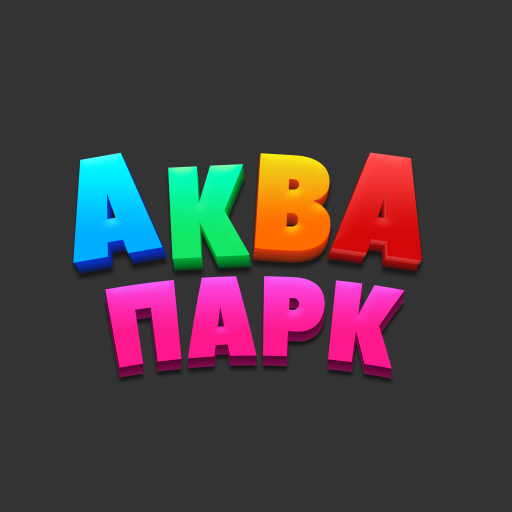
<style>
.page{position:relative;width:512px;height:512px;background:#333333}
.page>*{position:absolute;margin:0}
.t1{font:142.7px "PeaceSans";text-transform:uppercase;scale:0.85 1}
.t2{font:136.5px "PeaceSans";text-transform:uppercase;scale:0.85 1}
.t3{font:142.7px "PeaceSans";color:#df1919;text-transform:uppercase;scale:0.85 1}
.t4{font:130.3px "PeaceSans";text-transform:uppercase;scale:0.85 1}
.t5{font:111.7px "PeaceSans";text-transform:uppercase;scale:0.77 1}
</style>
<div class="page">
<p class="t1" style="left:73px;top:152px;width:90px;height:111px;rotate:-10deg">А</p>
<p class="t2" style="left:254px;top:153px;width:77px;height:98px;rotate:3deg">В</p>
<p class="t3" style="left:332px;top:152px;width:91px;height:109px;rotate:8deg">А</p>
<p class="t4" style="left:168px;top:164px;width:82px;height:95px;rotate:-3deg">К</p>
<p class="t5" style="left:105px;top:276px;width:300px;height:93px">ПАРК</p>
</div>
